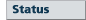
<style>
.page{position:relative;width:86px;height:20px;background:#d9dde0}
.page>*{position:absolute;margin:0}
.t1{font:11.4px "FrutigerBold";color:#103852;font-weight:bold;scale:1.05 1}
</style>
<div class="page">
<p class="t1" style="left:12px;top:5px;width:37px;height:9px">Status</p>
</div>
